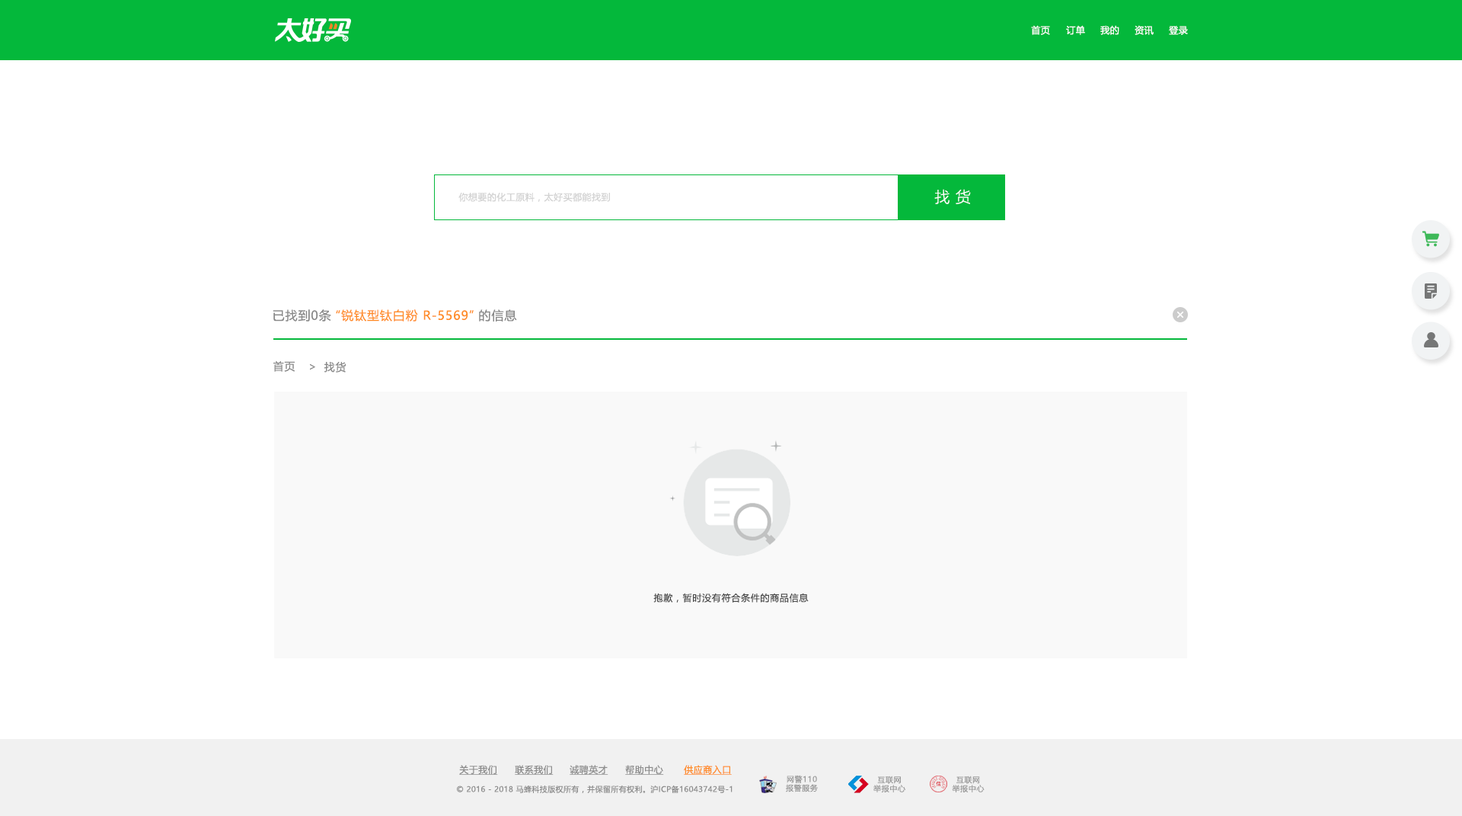
<style>
.page{position:relative;width:1462px;height:816px;background:#ffffff}
.page>*{position:absolute;margin:0}
.t1{font:9.1px "MicrosoftYaHeiUI";letter-spacing:0.04em;color:#ffffff}
.t2{font:9.1px "MicrosoftYaHeiUI";letter-spacing:0.04em;color:#d2d2d2}
.t3{font:15.2px "MicrosoftYaHeiUILight";letter-spacing:0.04em;color:#ffffff}
.t4{font:12.2px "MicrosoftYaHeiUI";letter-spacing:0.06em;color:#ff8d27}
.t5{font:12.2px "MicrosoftYaHeiUI";letter-spacing:0.06em;color:#888888}
.t6{font:10.7px "MicrosoftYaHeiUI";letter-spacing:0.06em;color:#888888}
.t7{font:9.1px "MicrosoftYaHeiUI";letter-spacing:0.06em;color:#4a4a4a}
.t8{font:9.1px "MicrosoftYaHeiUI";letter-spacing:0.04em;color:#8c8c8c;text-decoration:underline}
.t9{font:9.1px "MicrosoftYaHeiUI";letter-spacing:0.04em;color:#ff8b25;text-decoration:underline}
.t10{font:7.6px "MicrosoftYaHeiUI";letter-spacing:0.04em;color:#8c8c8c}
.t11{font:7.6px/8.8px "MicrosoftYaHei";letter-spacing:0.06em;color:#999999}
</style>
<div class="page">
<p class="t1" style="left:1031px;top:25px;width:19px;height:10px">首页</p>
<p class="t1" style="left:1066px;top:25px;width:19px;height:10px">订单</p>
<p class="t1" style="left:1100px;top:25px;width:19px;height:10px">我的</p>
<p class="t1" style="left:1135px;top:25px;width:19px;height:10px">资讯</p>
<p class="t1" style="left:1169px;top:26px;width:19px;height:9px">登录</p>
<p class="t2" style="left:458px;top:192px;width:152px;height:10px">你想要的化工原料，太好买都能找到</p>
<p class="t3" style="left:934px;top:189px;width:37px;height:15px">找 货</p>
<p class="t4" style="left:273px;top:309px;width:244px;height:12px"><span class="t5">已找到0条</span> “锐钛型钛白粉 R-5569” <span class="t5">的信息</span></p>
<p class="t6" style="left:273px;top:360px;width:22px;height:12px">首页</p>
<p class="t6" style="left:310px;top:363px;width:5px;height:7px">&gt;</p>
<p class="t6" style="left:324px;top:361px;width:22px;height:11px">找货</p>
<p class="t7" style="left:653px;top:592px;width:156px;height:10px">抱歉，暂时没有符合条件的商品信息</p>
<p class="t8" style="left:459px;top:765px;width:39px;height:9px">关于我们</p>
<p class="t8" style="left:515px;top:765px;width:39px;height:9px">联系我们</p>
<p class="t8" style="left:570px;top:765px;width:38px;height:9px">诚聘英才</p>
<p class="t8" style="left:625px;top:765px;width:39px;height:9px">帮助中心</p>
<p class="t9" style="left:684px;top:765px;width:48px;height:9px">供应商入口</p>
<p class="t10" style="left:457px;top:784px;width:276px;height:9px">© 2016 - 2018 马蜂科技版权所有，并保留所有权利。沪ICP备16043742号-1</p>
<p class="t11" style="left:786px;top:774px;width:32px;height:18px;text-align:center">网警110<br>报警服务</p>
<p class="t11" style="left:873px;top:775px;width:32px;height:17px;text-align:center">互联网<br>举报中心</p>
<p class="t11" style="left:952px;top:775px;width:33px;height:17px;text-align:center">互联网<br>举报中心</p>
</div>
